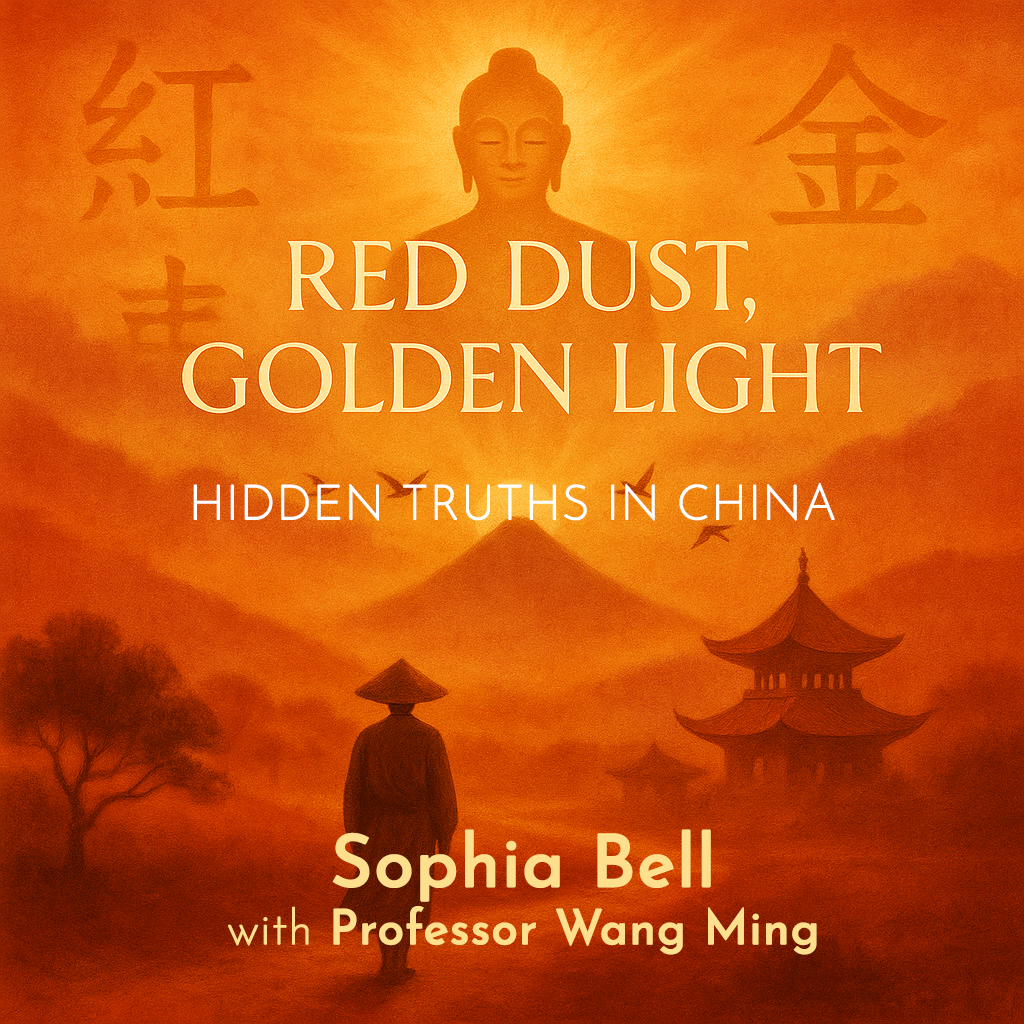
<style>
.page{position:relative;width:1024px;height:1024px}
.page>*{position:absolute;margin:0}
.t1{font:48px "JosefinSans-ExtraLight";color:#ffffff;font-weight:bold}
.t2{font:48px "JosefinSans-Regular";color:#fedf8d;font-weight:bold}
.t3{font:72px "JosefinSans-Regular";color:#fedf8d;font-weight:bold}
.t4{font:48px "JosefinSans-ExtraLight";color:#fedf8d;font-weight:bold}
</style>
<div class="page">
<p class="t1" style="left:193px;top:483px;width:642px;height:38px">HIDDEN TRUTHS IN CHINA</p>
<p class="t2" style="left:228px;top:829px;width:589px;height:126px;text-align:center"><span class="t3">Sophia Bell <br></span><span class="t4">with </span>Professor Wang Ming</p>
</div>
